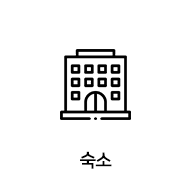
<style>
.page{position:relative;width:191px;height:191px;background:#ffffff}
.page>*{position:absolute;margin:0}
.t1{font:18.2px "NanumSquareB";letter-spacing:-0.05em;color:#000000}
</style>
<div class="page">
<p class="t1" style="left:80px;top:151px;width:32px;height:18px">숙소</p>
</div>
